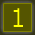
<style>
.page{position:relative;width:35px;height:35px;background:#555500}
.page>*{position:absolute;margin:0}
.t1{font:30px "Courier";letter-spacing:0.018em;color:#ffff00}
</style>
<div class="page">
<p class="t1" style="left:13px;top:8px;width:10px;height:19px">1</p>
</div>
